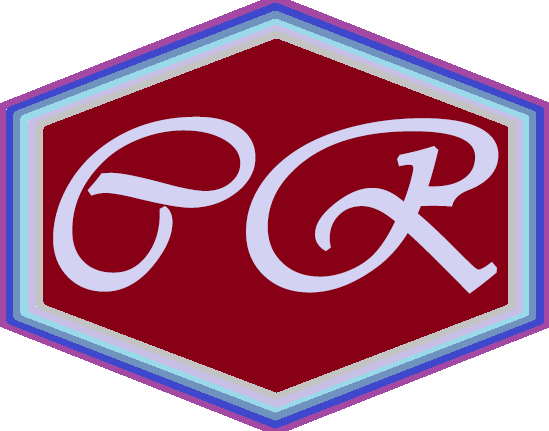
<style>
.page{position:relative;width:549px;height:431px;background:#880015}
.page>*{position:absolute;margin:0}
.t1{font:240px "Vivaldii";color:#d4d2f3;font-weight:bold}
</style>
<div class="page">
<p class="t1" style="left:53px;top:116px;width:446px;height:178px">CR</p>
</div>
